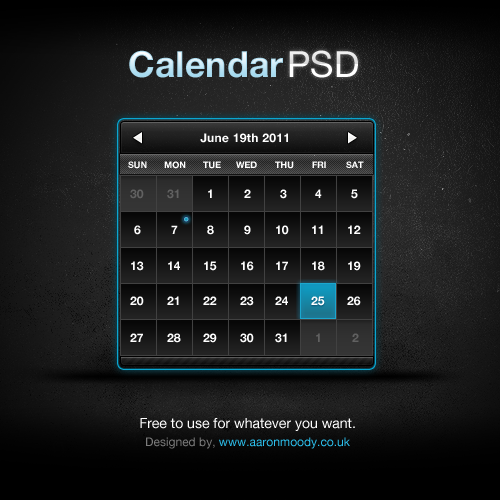
<style>
.page{position:relative;width:500px;height:500px}
.page>*{position:absolute;margin:0}
.t1{font:36px "HelveticaNeue-Bold";color:#b5dff1}
.t2{font:36px "HelveticaNeue";color:#ffffff}
.t3{font:12px "HelveticaNeue-Bold";letter-spacing:0.025em;color:#ffffff}
.t4{font:9px "HelveticaNeue-Bold";color:#ffffff}
.t5{font:12px "HelveticaNeue-Bold";color:#616161}
.t6{font:12px "HelveticaNeue-Bold";color:#ffffff}
.t7{font:14px/18px "HelveticaNeue";color:#ffffff}
.t8{font:12px/18px "HelveticaNeue";color:#7b7b7b}
.t9{font:12px/18px "HelveticaNeue";color:#2cbfec}
</style>
<div class="page">
<p class="t1" style="left:129px;top:50px;width:154px;height:28px">Calendar</p>
<p class="t2" style="left:289px;top:50px;width:69px;height:28px">PSD</p>
<p class="t3" style="left:200px;top:133px;width:88px;height:10px">June 19th 2011</p>
<p class="t4" style="left:128px;top:161px;width:19px;height:8px">SUN</p>
<p class="t4" style="left:164px;top:161px;width:22px;height:8px">MON</p>
<p class="t4" style="left:203px;top:161px;width:18px;height:8px">TUE</p>
<p class="t4" style="left:236px;top:161px;width:21px;height:7px">WED</p>
<p class="t4" style="left:275px;top:161px;width:19px;height:8px">THU</p>
<p class="t4" style="left:312px;top:161px;width:14px;height:7px">FRI</p>
<p class="t4" style="left:346px;top:161px;width:18px;height:7px">SAT</p>
<p class="t5" style="left:130px;top:189px;width:14px;height:10px">30</p>
<p class="t5" style="left:167px;top:189px;width:12px;height:10px">31</p>
<p class="t6" style="left:208px;top:189px;width:4px;height:9px">1</p>
<p class="t6" style="left:244px;top:189px;width:7px;height:9px">2</p>
<p class="t6" style="left:280px;top:189px;width:7px;height:10px">3</p>
<p class="t6" style="left:315px;top:189px;width:7px;height:9px">4</p>
<p class="t6" style="left:351px;top:189px;width:7px;height:10px">5</p>
<p class="t6" style="left:134px;top:225px;width:7px;height:10px">6</p>
<p class="t6" style="left:171px;top:225px;width:7px;height:9px">7</p>
<p class="t6" style="left:207px;top:225px;width:7px;height:10px">8</p>
<p class="t6" style="left:244px;top:225px;width:7px;height:10px">9</p>
<p class="t6" style="left:276px;top:225px;width:13px;height:10px">10</p>
<p class="t6" style="left:312px;top:225px;width:11px;height:9px">11</p>
<p class="t6" style="left:348px;top:225px;width:13px;height:9px">12</p>
<p class="t6" style="left:131px;top:261px;width:13px;height:10px">13</p>
<p class="t6" style="left:168px;top:261px;width:12px;height:9px">14</p>
<p class="t6" style="left:204px;top:261px;width:13px;height:10px">15</p>
<p class="t6" style="left:241px;top:261px;width:13px;height:10px">16</p>
<p class="t6" style="left:276px;top:261px;width:12px;height:9px">17</p>
<p class="t6" style="left:312px;top:261px;width:13px;height:10px">18</p>
<p class="t6" style="left:348px;top:261px;width:13px;height:10px">19</p>
<p class="t6" style="left:130px;top:296px;width:14px;height:10px">20</p>
<p class="t6" style="left:167px;top:296px;width:12px;height:9px">21</p>
<p class="t6" style="left:203px;top:296px;width:14px;height:9px">22</p>
<p class="t6" style="left:240px;top:296px;width:14px;height:10px">23</p>
<p class="t6" style="left:275px;top:296px;width:13px;height:9px">24</p>
<p class="t6" style="left:311px;top:296px;width:14px;height:10px">25</p>
<p class="t6" style="left:347px;top:296px;width:14px;height:10px">26</p>
<p class="t6" style="left:130px;top:333px;width:13px;height:9px">27</p>
<p class="t6" style="left:167px;top:333px;width:14px;height:10px">28</p>
<p class="t6" style="left:203px;top:333px;width:14px;height:10px">29</p>
<p class="t6" style="left:240px;top:333px;width:14px;height:10px">30</p>
<p class="t6" style="left:275px;top:333px;width:12px;height:10px">31</p>
<p class="t5" style="left:316px;top:333px;width:4px;height:9px">1</p>
<p class="t5" style="left:352px;top:333px;width:7px;height:9px">2</p>
<p class="t7" style="left:140px;top:418px;width:215px;height:31px;text-align:center">Free to use for whatever you want.<br><span class="t8">Designed by, </span><span class="t9">www.aaronmoody.co.uk</span></p>
</div>
